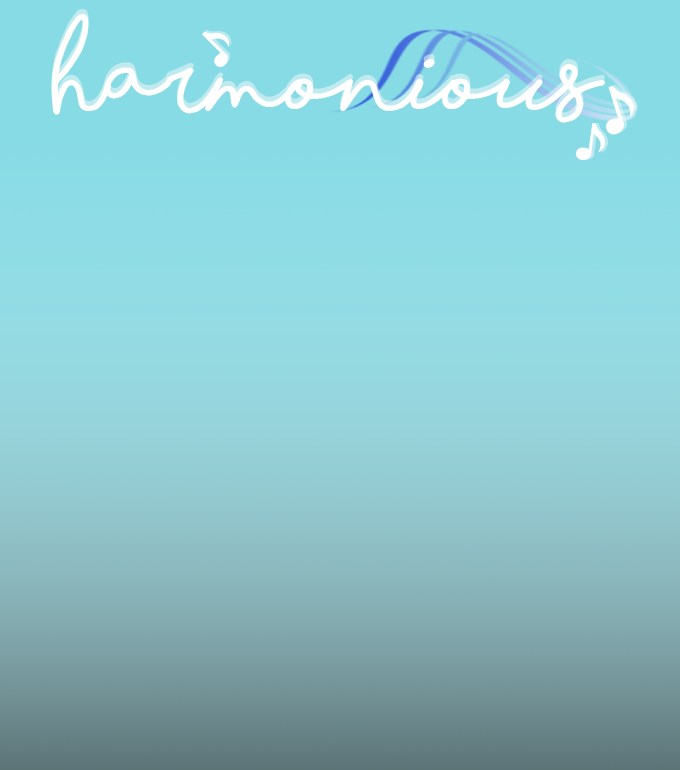
<style>
.page{position:relative;width:680px;height:770px}
.page>*{position:absolute;margin:0}
.t1{font:90px "ShorelinesScriptBold";color:#ffffff}
.t2{font:90px "ShorelinesScriptBold"}
</style>
<div class="page">
<p class="t1" style="left:51px;top:14px;width:554px;height:109px">Harmonious</p>
<p class="t2" style="left:51px;top:9px;width:554px;height:109px">Harmonious</p>
</div>
